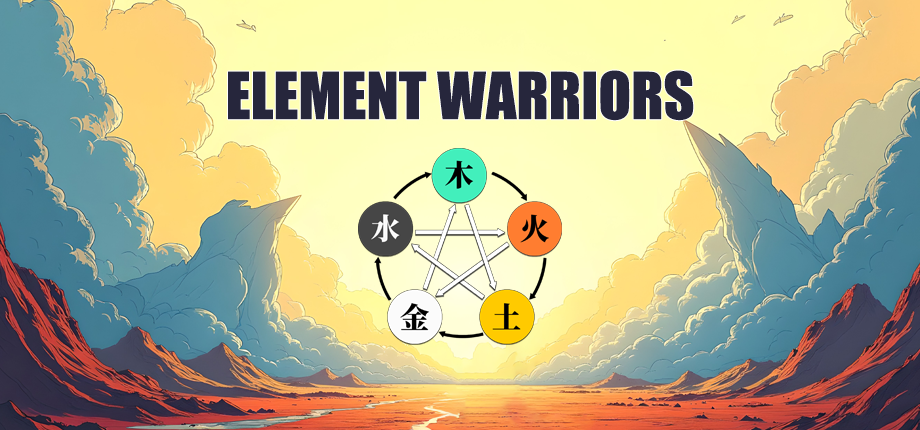
<style>
.page{position:relative;width:920px;height:430px}
.page>*{position:absolute;margin:0}
.t1{font:60px "Impact";color:#26263c}
</style>
<div class="page">
<p class="t1" style="left:228px;top:70px;width:466px;height:51px">ELEMENT WARRIORS</p>
</div>
